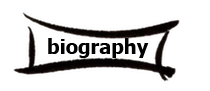
<style>
.page{position:relative;width:210px;height:91px;background:#ffffff}
.page>*{position:absolute;margin:0}
.t1{font:20px "Tahoma-Bold";color:#010101}
</style>
<div class="page">
<p class="t1" style="left:48px;top:38px;width:101px;height:20px">biography</p>
</div>
